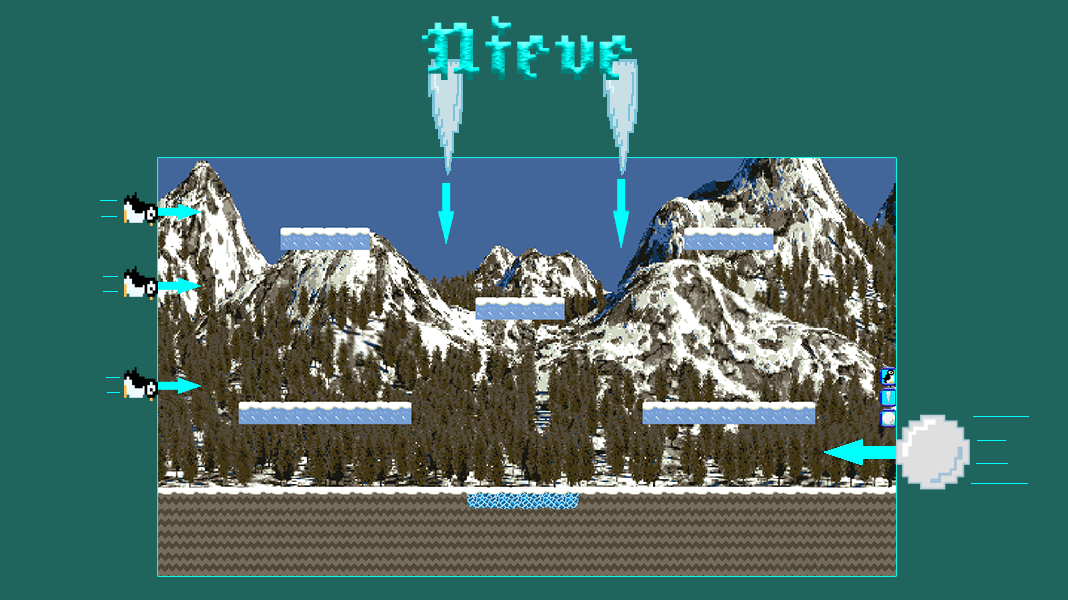
<style>
.page{position:relative;width:1068px;height:600px;background:#1f655e}
.page>*{position:absolute;margin:0}
.t1{font:101.5px "OwreKynge"}
</style>
<div class="page">
<p class="t1" style="left:422px;top:16px;width:210px;height:64px">Nieve</p>
</div>
